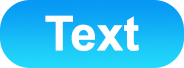
<style>
.page{position:relative;width:184px;height:68px}
.page>*{position:absolute;margin:0}
.t1{font:48px "Arial-BoldMT";color:#ffffff}
</style>
<div class="page">
<p class="t1" style="left:45px;top:15px;width:94px;height:36px">Text</p>
</div>
